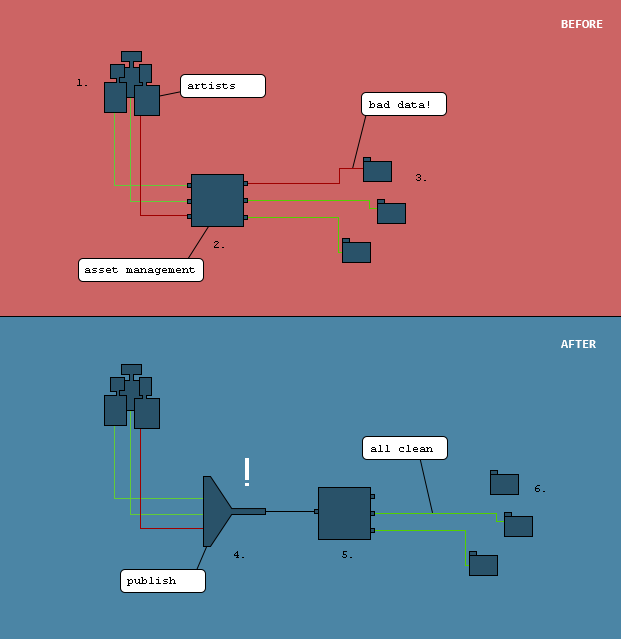
<style>
.page{position:relative;width:621px;height:639px;background:#4b85a5}
.page>*{position:absolute;margin:0}
.t1{font:13px "Consolas-Bold";color:#ffffff;text-transform:uppercase}
.t2{font:11px "CourierNewPSMT";color:#000000}
.t3{font:45.4px "Courier";color:#ffffff;scale:1.45 1}
</style>
<div class="page">
<p class="t1" style="left:561px;top:20px;width:42px;height:8px">before</p>
<p class="t2" style="left:77px;top:79px;width:10px;height:7px">1.</p>
<p class="t2" style="left:188px;top:82px;width:47px;height:7px">artists</p>
<p class="t2" style="left:369px;top:101px;width:60px;height:7px">bad data!</p>
<p class="t2" style="left:416px;top:174px;width:10px;height:7px">3.</p>
<p class="t2" style="left:214px;top:241px;width:10px;height:7px">2.</p>
<p class="t2" style="left:85px;top:267px;width:110px;height:8px">asset management</p>
<p class="t1" style="left:561px;top:340px;width:35px;height:8px">after</p>
<p class="t2" style="left:371px;top:445px;width:62px;height:7px">all clean</p>
<p class="t3" style="left:245px;top:458px;width:4px;height:28px">!</p>
<p class="t2" style="left:535px;top:485px;width:10px;height:7px">6.</p>
<p class="t2" style="left:234px;top:551px;width:10px;height:7px">4.</p>
<p class="t2" style="left:342px;top:551px;width:10px;height:7px">5.</p>
<p class="t2" style="left:127px;top:577px;width:49px;height:9px">publish</p>
</div>
